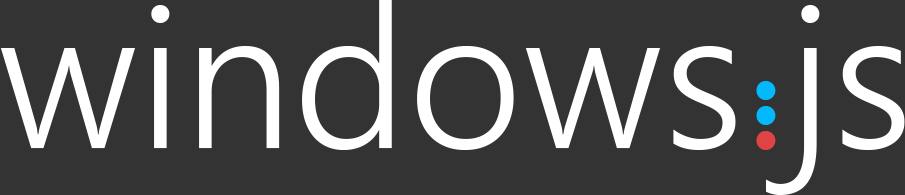
<style>
.page{position:relative;width:905px;height:195px;background:#333333}
.page>*{position:absolute;margin:0}
.t1{font:200px "SegoeUI-Semilight";color:#ffffff}
.t2{font:200px "SegoeUI-Semilight";color:#e04343}
.t3{font:200px "SegoeUI-Semilight";color:#03b9fc}
</style>
<div class="page">
<p class="t1" style="left:0px;top:0px;width:905px;height:195px">windows<span class="t2">.</span>js</p>
<p class="t3" style="left:756px;top:81px;width:20px;height:19px">.</p>
<p class="t3" style="left:756px;top:106px;width:20px;height:19px">.</p>
</div>
